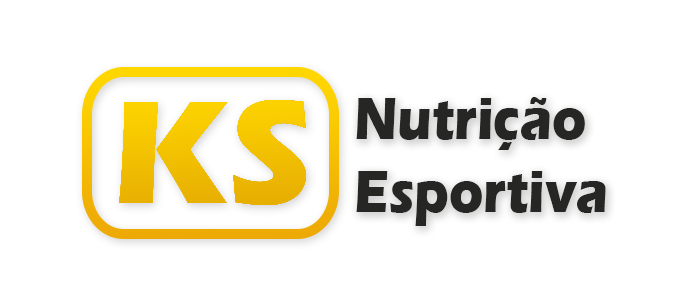
<style>
.page{position:relative;width:700px;height:300px;background:#ffffff}
.page>*{position:absolute;margin:0}
.t1{font:60.9px "ErasITC-Bold";color:#262625;scale:0.87 1}
</style>
<div class="page">
<p class="t1" style="left:356px;top:97px;width:250px;height:129px">Nutrição<br>Esportiva</p>
<p class="t1" style="left:356px;top:97px;width:250px;height:129px">Nutrição<br>Esportiva</p>
</div>
